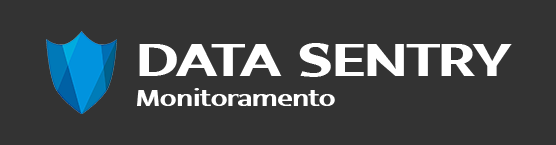
<style>
.page{position:relative;width:556px;height:145px;background:#333333}
.page>*{position:absolute;margin:0}
.t1{font:24px/30px "Mukta-Bold";letter-spacing:-0.04em;color:#ffffff;scale:1.3 1}
.t2{font:52px/30px "Mukta-Bold";letter-spacing:-0.04em;color:#ffffff;scale:1.3 1}
</style>
<div class="page">
<p class="t1" style="left:137px;top:43px;width:375px;height:63px"><span class="t2">DATA SENTRY<br></span>Monitoramento</p>
</div>
